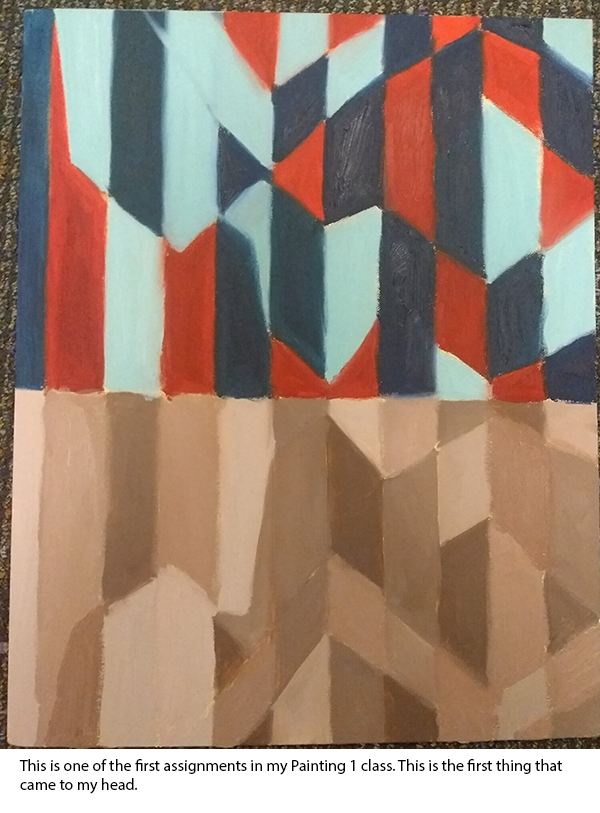
<style>
.page{position:relative;width:600px;height:813px}
.page>*{position:absolute;margin:0}
.t1{font:16px "MyriadPro-Regular";color:#000000}
</style>
<div class="page">
<p class="t1" style="left:19px;top:759px;width:543px;height:35px">This is one of the first assignments in my Painting 1 class. This is the first thing that came to my head.</p>
</div>
